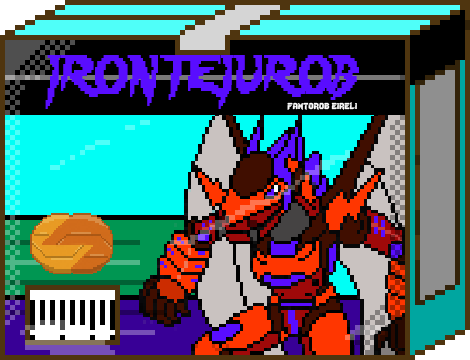
<style>
.page{position:relative;width:470px;height:360px}
.page>*{position:absolute;margin:0}
.t1{font:48px "Lady-Radical";color:#590dff;scale:0.72 1}
.t2{font:12px "Lady-Radical";color:#fbfbfb}
</style>
<div class="page">
<p class="t1" style="left:45px;top:55px;width:314px;height:54px">IRONTEIUROB</p>
<p class="t2" style="left:287px;top:102px;width:70px;height:8px">fantorob eireli</p>
</div>
